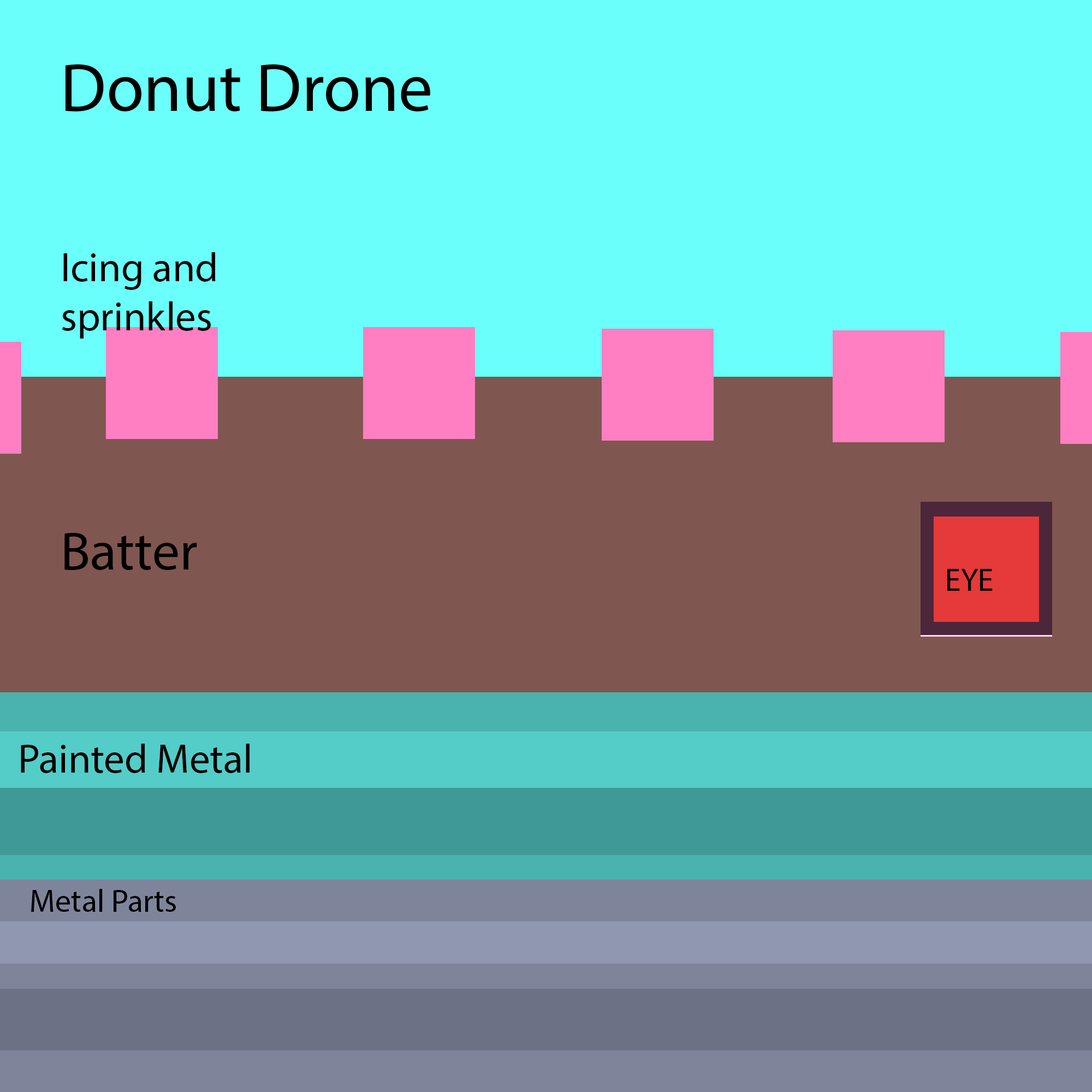
<style>
.page{position:relative;width:1092px;height:1092px;background:#6afffa}
.page>*{position:absolute;margin:0}
.t1{font:68.2px "MyriadPro-Regular";color:#000000}
.t2{font:40.9px "MyriadPro-Regular";color:#000000}
.t3{font:54.6px "MyriadPro-Regular";color:#000000}
</style>
<div class="page">
<p class="t1" style="left:66px;top:64px;width:364px;height:48px">Donut Drone</p>
<p class="t2" style="left:62px;top:252px;width:154px;height:87px">Icing and sprinkles</p>
<p class="t3" style="left:64px;top:533px;width:133px;height:37px">Batter</p>
<p class="t2" style="left:21px;top:744px;width:229px;height:29px">Painted Metal</p>
</div>
